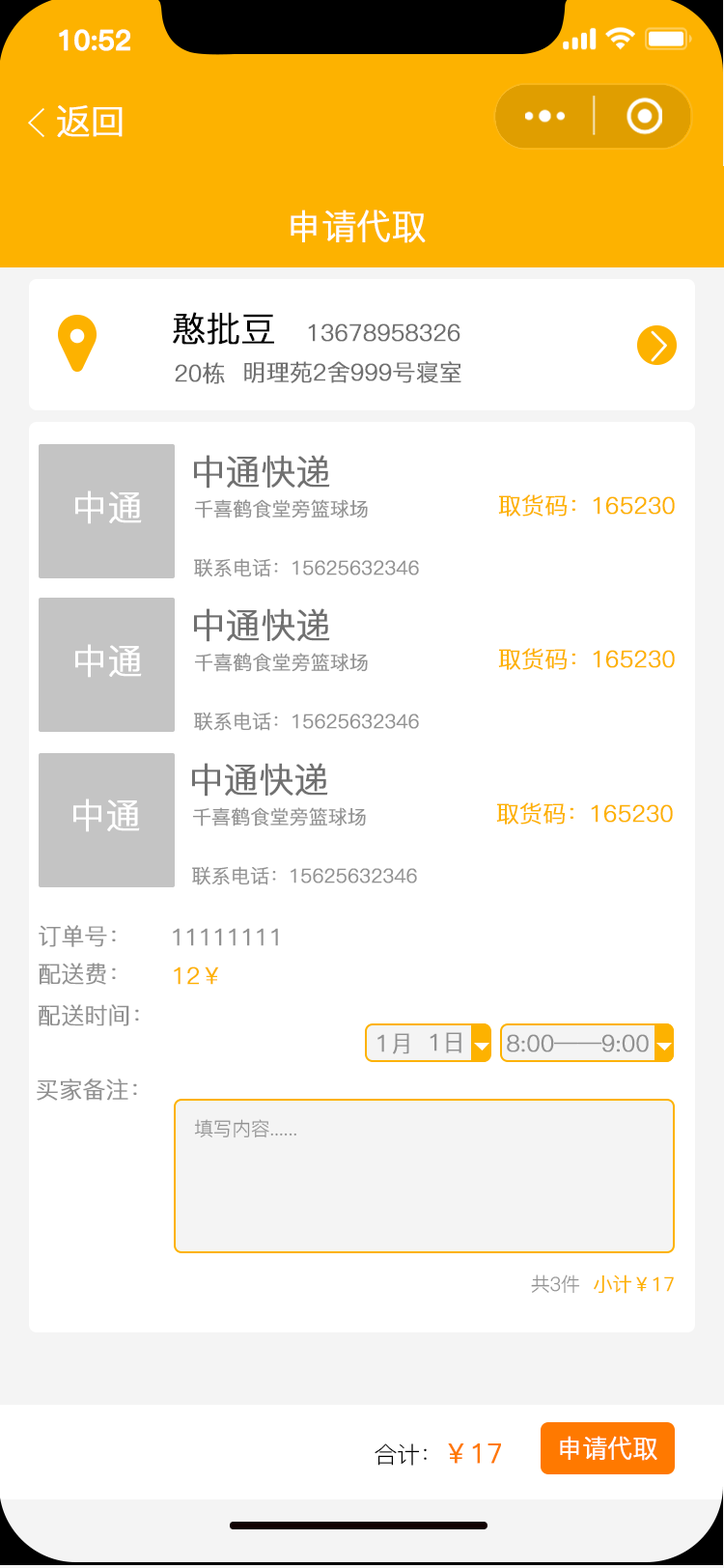
<style>
.page{position:relative;width:724px;height:1568px;background:#ffffff}
.page>*{position:absolute;margin:0}
.t1{font:27.5px "PingFang-SC-Bold";letter-spacing:-0.02em;color:#ffffff;font-weight:bold}
.t2{font:34.8px "PingFang-SC-Regular";letter-spacing:-0.02em;color:#ffffff;font-weight:bold}
.t3{font:34.8px "PingFang-SC-Regular";letter-spacing:-0.02em;color:#000000;font-weight:bold}
.t4{font:23.2px "PingFang-SC-Regular";letter-spacing:-0.02em;color:#707070;font-weight:bold}
.t5{font:34.8px "PingFang-SC-Regular";letter-spacing:-0.02em;color:#707070;font-weight:bold}
.t6{font:23.2px "PingFang-SC-Regular";letter-spacing:-0.02em;color:#fdb200;font-weight:bold}
.t7{font:19.3px "PingFang-SC-Regular";letter-spacing:-0.02em;color:#919191;font-weight:bold}
.t8{font:23.2px "PingFang-SC-Regular";letter-spacing:-0.02em;color:#919191;font-weight:bold}
.t9{font:19.3px "PingFang-SC-Regular";letter-spacing:-0.02em;color:#919191}
.t10{font:19.3px "PingFang-SC-Regular";letter-spacing:-0.02em;color:#fdb200;font-weight:bold}
.t11{font:23.2px "PingFang-SC-Regular";letter-spacing:-0.02em;color:#000000}
.t12{font:27px "PingFang-SC-Regular";letter-spacing:-0.02em;color:#ff7900;font-weight:bold}
.t13{font:25.1px "PingFang-SC-Regular";letter-spacing:-0.02em;color:#fefefe;font-weight:bold}
</style>
<div class="page">
<p class="t1" style="left:59px;top:29px;width:71px;height:22px">10:52</p>
<p class="t2" style="left:57px;top:105px;width:66px;height:32px">返回</p>
<p class="t2" style="left:291px;top:210px;width:135px;height:33px">申请代取</p>
<p class="t3" style="left:173px;top:312px;width:101px;height:33px">憨批豆</p>
<p class="t4" style="left:308px;top:323px;width:153px;height:19px">13678958326</p>
<p class="t4" style="left:175px;top:362px;width:50px;height:22px">20栋</p>
<p class="t4" style="left:244px;top:361px;width:218px;height:22px">明理苑2舍999号寝室</p>
<p class="t5" style="left:194px;top:455px;width:136px;height:34px">中通快递</p>
<p class="t2" style="left:75px;top:490px;width:67px;height:34px">中通</p>
<p class="t6" style="left:498px;top:494px;width:177px;height:23px">取货码：165230</p>
<p class="t7" style="left:194px;top:499px;width:174px;height:19px">千喜鹤食堂旁篮球场</p>
<p class="t7" style="left:194px;top:558px;width:225px;height:19px">联系电话：15625632346</p>
<p class="t5" style="left:194px;top:608px;width:136px;height:34px">中通快递</p>
<p class="t2" style="left:75px;top:644px;width:67px;height:34px">中通</p>
<p class="t7" style="left:194px;top:653px;width:174px;height:19px">千喜鹤食堂旁篮球场</p>
<p class="t6" style="left:498px;top:648px;width:177px;height:22px">取货码：165230</p>
<p class="t7" style="left:194px;top:712px;width:225px;height:19px">联系电话：15625632346</p>
<p class="t5" style="left:192px;top:763px;width:136px;height:34px">中通快递</p>
<p class="t2" style="left:73px;top:798px;width:67px;height:34px">中通</p>
<p class="t7" style="left:192px;top:807px;width:174px;height:19px">千喜鹤食堂旁篮球场</p>
<p class="t6" style="left:496px;top:802px;width:177px;height:23px">取货码：165230</p>
<p class="t7" style="left:192px;top:866px;width:225px;height:19px">联系电话：15625632346</p>
<p class="t8" style="left:39px;top:925px;width:77px;height:22px">订单号：</p>
<p class="t8" style="left:173px;top:928px;width:105px;height:18px">11111111</p>
<p class="t8" style="left:39px;top:963px;width:77px;height:22px">配送费：</p>
<p class="t6" style="left:174px;top:966px;width:45px;height:19px">12￥</p>
<p class="t8" style="left:38px;top:1004px;width:101px;height:22px">配送时间：</p>
<p class="t8" style="left:378px;top:1033px;width:31px;height:21px">1月</p>
<p class="t8" style="left:430px;top:1032px;width:32px;height:21px">1日</p>
<p class="t8" style="left:507px;top:1034px;width:142px;height:18px">8:00——9:00</p>
<p class="t8" style="left:37px;top:1078px;width:100px;height:23px">买家备注：</p>
<p class="t9" style="left:194px;top:1119px;width:102px;height:19px">填写内容......</p>
<p class="t9" style="left:531px;top:1274px;width:49px;height:20px">共3件</p>
<p class="t10" style="left:594px;top:1274px;width:80px;height:20px">小计￥17</p>
<p class="t11" style="left:375px;top:1443px;width:126px;height:23px">合计：<span class="t12">￥17</span></p>
<p class="t13" style="left:560px;top:1436px;width:98px;height:25px">申请代取</p>
</div>
